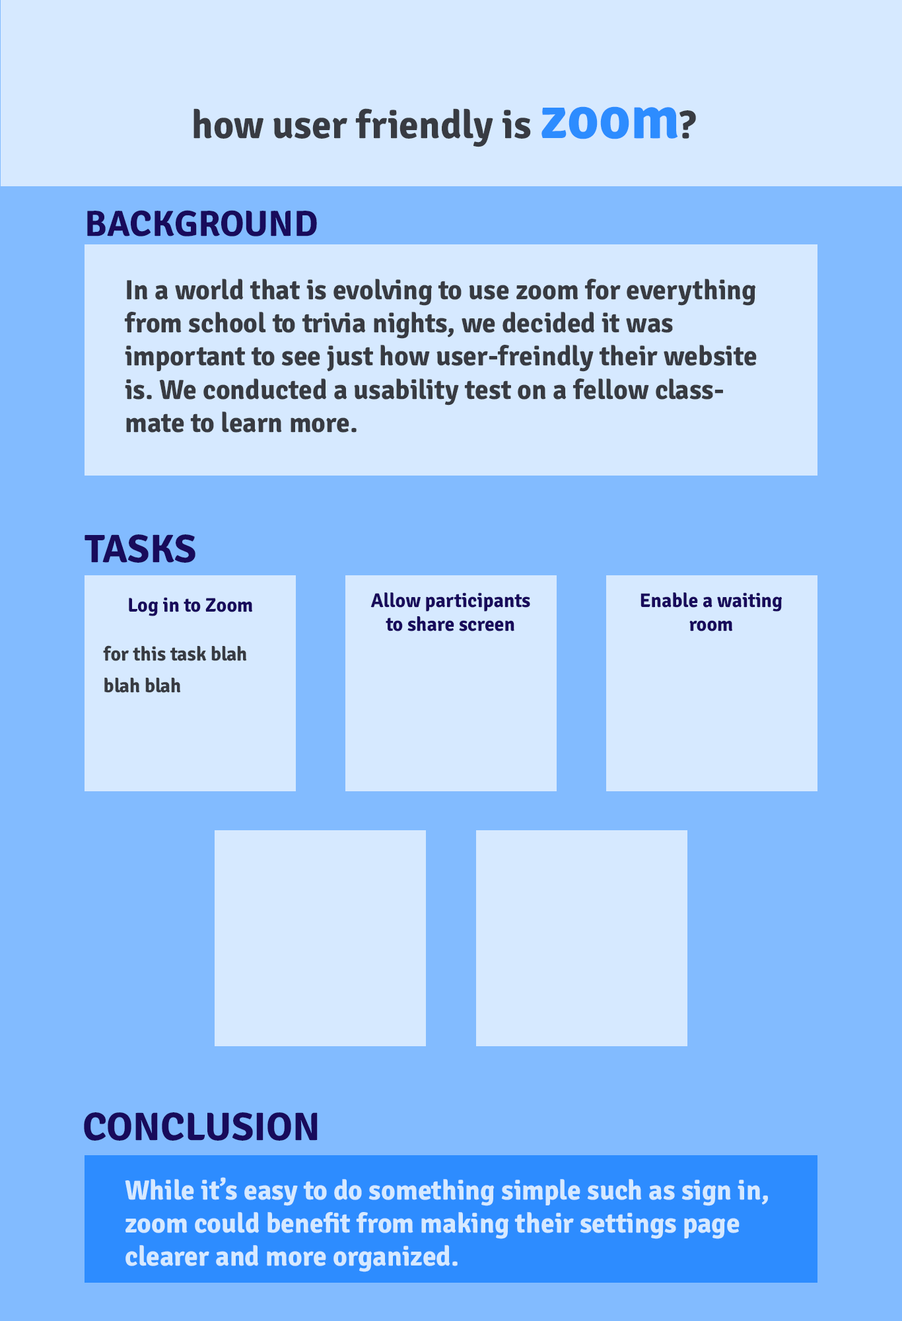
<style>
.page{position:relative;width:902px;height:1321px;background:#82bbff}
.page>*{position:absolute;margin:0}
.t1{font:39.6px "Signika-Bold";color:#383b42}
.t2{font:60.8px "Signika-Bold";color:#2d8cff}
.t3{font:39.6px "Signika-Bold";color:#0d0630}
.t4{font:36.3px "Signika-Bold";color:#180b5b}
.t5{font:27.7px "Signika-Bold";color:#383b42}
.t6{font:39.6px "Signika-Bold";color:#180b5b}
.t7{font:19.8px "Signika-Bold";color:#180b5b}
.t8{font:19.8px "Signika-Bold";color:#383b42}
.t9{font:27.6px "Signika-Bold";color:#d6e9ff}
</style>
<div class="page">
<p class="t1" style="left:194px;top:106px;width:502px;height:41px">how user friendly is <span class="t2">zoom</span>?<br><span class="t2"><br>m</span><span class="t3">?</span></p>
<p class="t4" style="left:87px;top:210px;width:230px;height:27px">BACKGROUND</p>
<p class="t5" style="left:124px;top:279px;width:633px;height:154px">In a world that is evolving to use zoom for everything from school to trivia nights, we decided it was<br>important to see just how user-freindly their website is. We conducted a usability test on a fellow classmate to learn more.</p>
<p class="t6" style="left:85px;top:534px;width:111px;height:29px">TASKS</p>
<p class="t7" style="left:371px;top:593px;width:160px;height:39px;text-align:center">Allow participants to share screen</p>
<p class="t7" style="left:641px;top:593px;width:142px;height:39px;text-align:center">Enable a waiting room</p>
<p class="t7" style="left:129px;top:597px;width:124px;height:19px">Log in to Zoom</p>
<p class="t8" style="left:103px;top:645px;width:144px;height:48px">for this task blah blah blah</p>
<p class="t6" style="left:84px;top:1113px;width:234px;height:28px">CONCLUSION</p>
<p class="t9" style="left:125px;top:1177px;width:643px;height:95px">While it’s easy to do something simple such as sign in, zoom could benefit from making their settings page clearer and more organized.</p>
</div>
